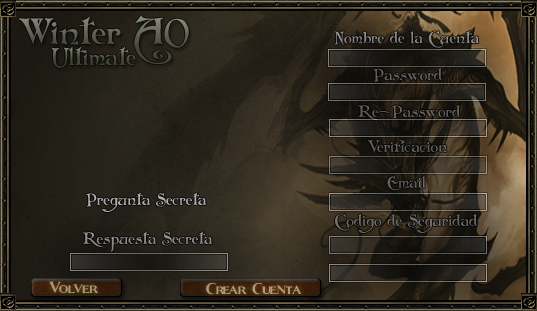
<style>
.page{position:relative;width:537px;height:311px}
.page>*{position:absolute;margin:0}
.t1{font:36px "Folkard"}
.t2{font:16px "Folkard";color:#888785}
.t3{font:24px "Folkard";color:#4a4d3e}
.t4{font:16px "Folkard";color:#605f5e}
.t5{font:16px "Folkard";color:#5f5e5d}
.t6{font:16px "Folkard";color:#61605e}
.t7{font:16px "Folkard";color:#636260}
.t8{font:16px "Folkard";color:#b0afad}
.t9{font:16px "Folkard";color:#6e6b68}
.t10{font:16px "Folkard";color:#8e8e8d}
.t11{font:30px "Fleet-Street";color:#9fa17c}
.t12{font:30px "Fleet-Street";color:#a0a27c}
</style>
<div class="page">
<p class="t1" style="left:19px;top:15px;width:170px;height:49px">Winter AO</p>
<p class="t2" style="left:334px;top:30px;width:145px;height:18px">Nombre de la Cuenta</p>
<p class="t3" style="left:51px;top:46px;width:85px;height:22px">Ultimate</p>
<p class="t4" style="left:373px;top:68px;width:69px;height:15px">Password</p>
<p class="t5" style="left:358px;top:104px;width:102px;height:17px">Re-Password</p>
<p class="t6" style="left:368px;top:140px;width:79px;height:13px">Verificacion</p>
<p class="t7" style="left:387px;top:175px;width:39px;height:16px">Email</p>
<p class="t8" style="left:86px;top:192px;width:121px;height:20px">Pregunta Secreta</p>
<p class="t9" style="left:335px;top:213px;width:142px;height:20px">Codigo de Seguridad</p>
<p class="t10" style="left:82px;top:231px;width:131px;height:21px">Respuesta Secreta</p>
<p class="t11" style="left:49px;top:281px;width:49px;height:12px">Volver</p>
<p class="t12" style="left:206px;top:282px;width:95px;height:13px">Crear Cuenta</p>
</div>
